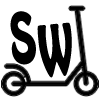
<style>
.page{position:relative;width:100px;height:100px;background:#ffffff}
.page>*{position:absolute;margin:0}
.t1{font:60px "HoboStd";color:#000000;font-weight:bold;scale:0.65 1}
</style>
<div class="page">
<p class="t1" style="left:10px;top:11px;width:26px;height:54px;rotate:-6deg">S</p>
<p class="t1" style="left:37px;top:22px;width:35px;height:56px;rotate:-6deg">W</p>
</div>
